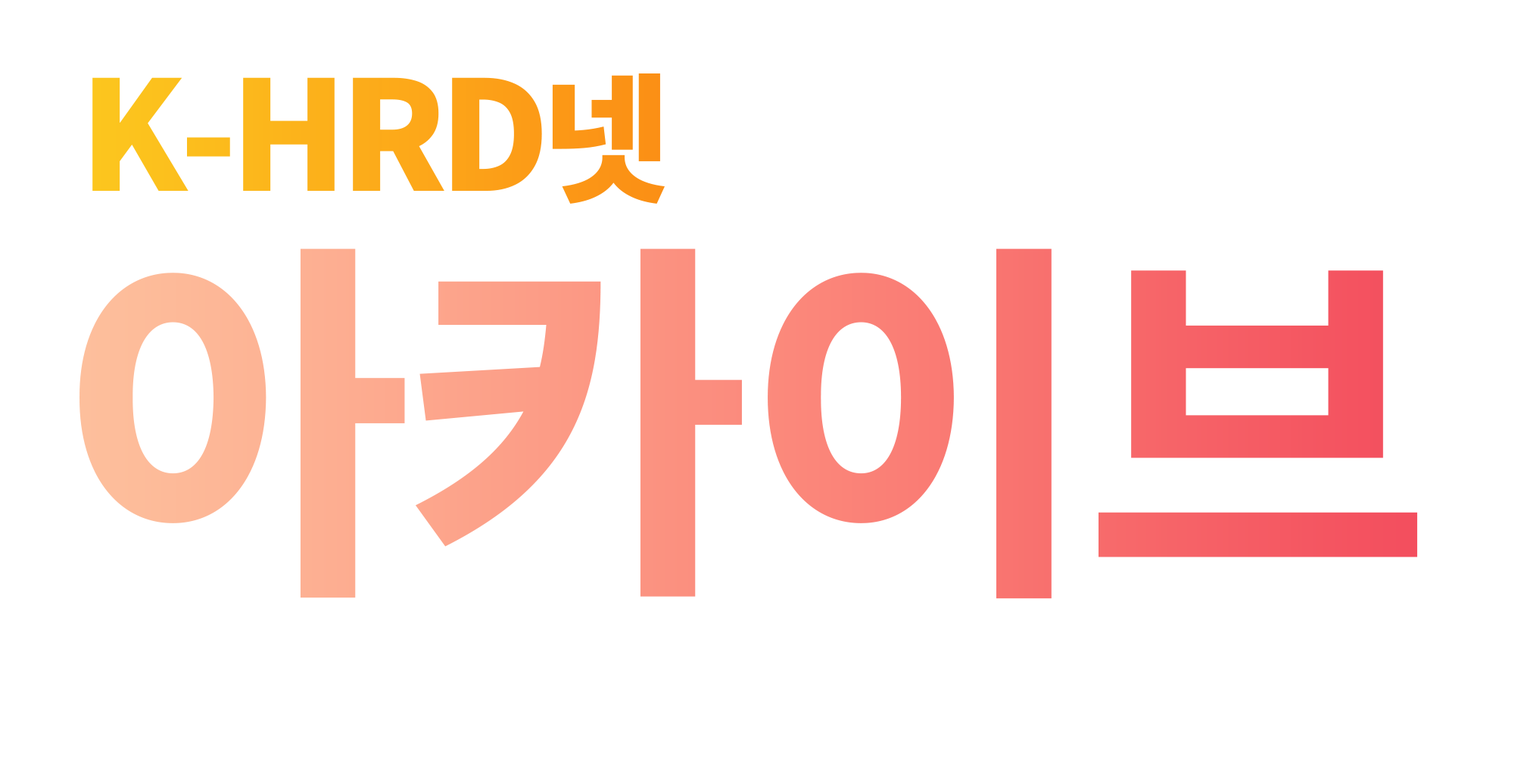
<style>
.page{position:relative;width:1524px;height:783px;background:#ffffff}
.page>*{position:absolute;margin:0}
.t1{font:151.6px "NotoSansKR-Black";letter-spacing:-0.05em}
.t2{font:139px "NotoSansKR-Black";letter-spacing:-0.05em}
.t3{font:388.8px "Pretendard-ExtraBold";letter-spacing:0.01em}
.t4{font:466.6px "Pretendard-ExtraBold";letter-spacing:0.01em}
</style>
<div class="page">
<p class="t1" style="left:92px;top:73px;width:573px;height:131px">K-HRD<span class="t2">넷</span></p>
<p class="t3" style="left:79px;top:248px;width:1338px;height:351px"><span class="t4"> </span>아카이브</p>
</div>
